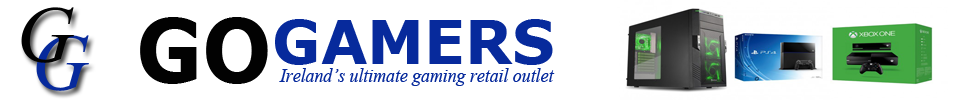
<style>
.page{position:relative;width:968px;height:100px;background:#ffffff}
.page>*{position:absolute;margin:0}
.t1{font:90px "Verdana-Bold";color:#020202;scale:0.91 1}
.t2{font:60px "Verdana-Bold";color:#072a9c}
.t3{font:20px "TimesNewRomanPS-ItalicMT";color:#072a9c;scale:0.89 1}
</style>
<div class="page">
<p class="t1" style="left:140px;top:17px;width:128px;height:67px">GO</p>
<p class="t2" style="left:275px;top:19px;width:278px;height:46px">GAMERS</p>
<p class="t3" style="left:279px;top:68px;width:276px;height:18px">Ireland’s ultimate gaming retail outlet</p>
</div>
